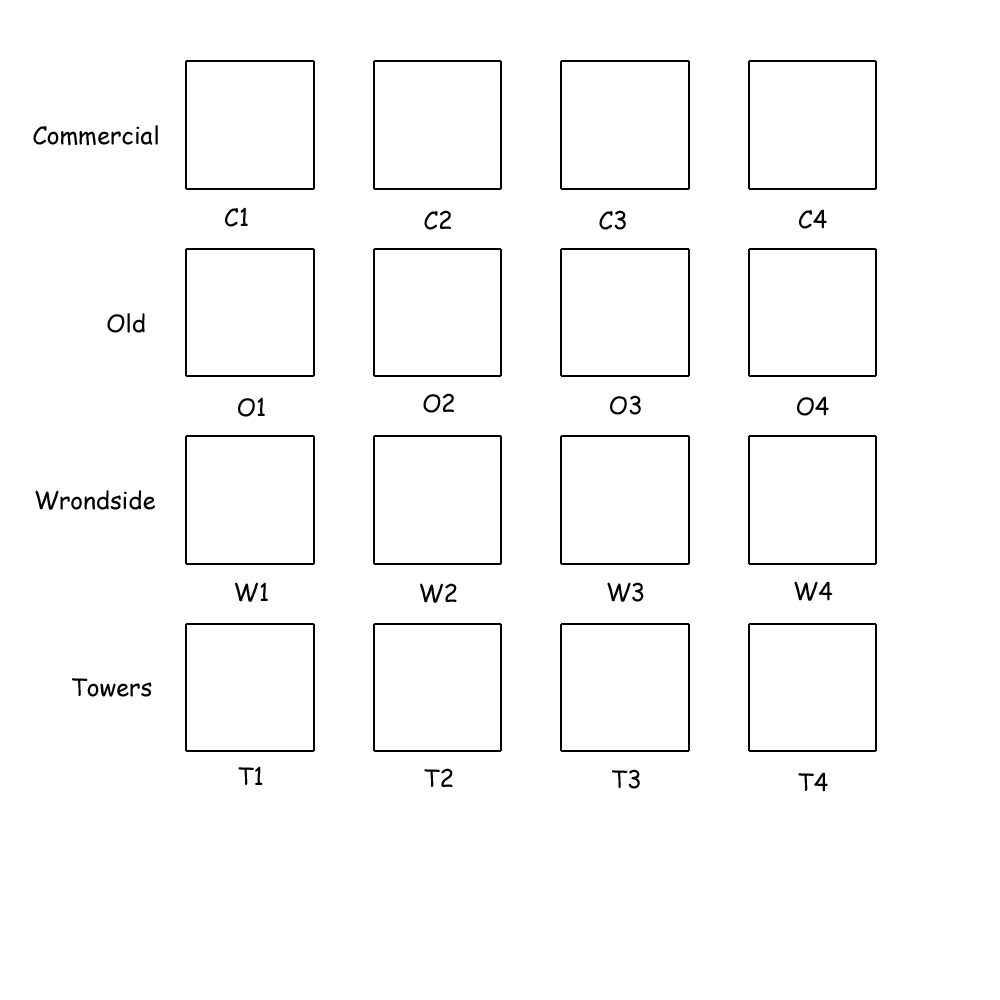
<style>
.page{position:relative;width:1000px;height:1000px;background:#ffffff}
.page>*{position:absolute;margin:0}
.t1{font:24px "ComicSansMS";color:#000000}
</style>
<div class="page">
<p class="t1" style="left:33px;top:125px;width:125px;height:21px">Commercial</p>
<p class="t1" style="left:225px;top:207px;width:23px;height:20px">C1</p>
<p class="t1" style="left:799px;top:209px;width:28px;height:20px">C4</p>
<p class="t1" style="left:424px;top:210px;width:27px;height:20px">C2</p>
<p class="t1" style="left:599px;top:210px;width:27px;height:20px">C3</p>
<p class="t1" style="left:107px;top:313px;width:38px;height:20px">Old</p>
<p class="t1" style="left:238px;top:397px;width:27px;height:20px">O1</p>
<p class="t1" style="left:423px;top:393px;width:31px;height:20px">O2</p>
<p class="t1" style="left:610px;top:395px;width:31px;height:20px">O3</p>
<p class="t1" style="left:797px;top:396px;width:32px;height:20px">O4</p>
<p class="t1" style="left:35px;top:490px;width:120px;height:20px">Wrondside</p>
<p class="t1" style="left:235px;top:582px;width:33px;height:20px">W1</p>
<p class="t1" style="left:607px;top:582px;width:37px;height:20px">W3</p>
<p class="t1" style="left:794px;top:581px;width:39px;height:20px">W4</p>
<p class="t1" style="left:420px;top:583px;width:37px;height:20px">W2</p>
<p class="t1" style="left:72px;top:678px;width:80px;height:19px">Towers</p>
<p class="t1" style="left:238px;top:766px;width:25px;height:19px">T1</p>
<p class="t1" style="left:424px;top:768px;width:29px;height:19px">T2</p>
<p class="t1" style="left:612px;top:769px;width:28px;height:20px">T3</p>
<p class="t1" style="left:798px;top:772px;width:30px;height:20px">T4</p>
</div>
